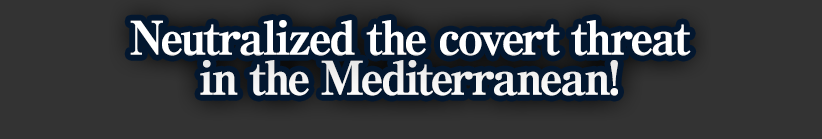
<style>
.page{position:relative;width:822px;height:139px;background:#333333}
.page>*{position:absolute;margin:0}
.t1{font:46px/40px "RyuminPro-ExBold";letter-spacing:-0.08em;color:#ffffff;font-weight:bold}
</style>
<div class="page">
<p class="t1" style="left:130px;top:20px;width:561px;height:76px;text-align:center">Neutralized the covert threat<br>in the Mediterranean!</p>
</div>
